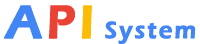
<style>
.page{position:relative;width:200px;height:44px;background:#ffffff}
.page>*{position:absolute;margin:0}
.t1{font:24px "ErasITC-Demi";letter-spacing:0.07em;color:#4285f4;font-weight:bold}
.t2{font:48px "ErasITC-Demi";letter-spacing:0.07em;color:#4285f4;font-weight:bold}
.t3{font:48px "ErasITC-Demi";letter-spacing:0.07em;color:#ea4335;font-weight:bold}
.t4{font:48px "ErasITC-Demi";letter-spacing:0.07em;color:#fbbc05;font-weight:bold}
</style>
<div class="page">
<p class="t1" style="left:3px;top:5px;width:193px;height:40px"><span class="t2">A</span><span class="t3">P</span><span class="t4">I </span>System</p>
</div>
